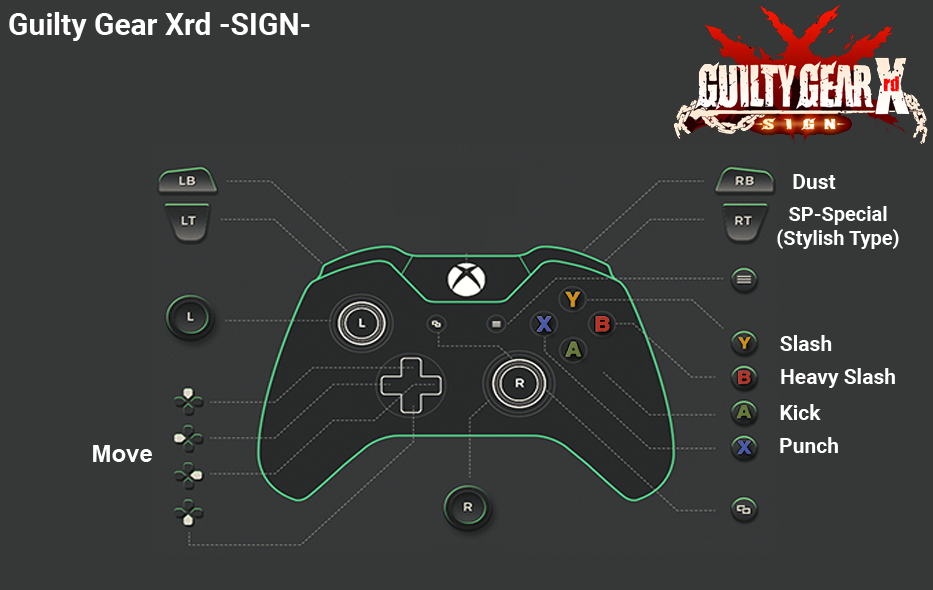
<style>
.page{position:relative;width:933px;height:590px;background:#363838}
.page>*{position:absolute;margin:0}
.t1{font:30px "Roboto-Bold";color:#ffffff}
.t2{font:21px "Roboto-Bold";color:#ffffff}
.t3{font:20px/24px "Roboto-Bold";color:#ffffff}
.t4{font:24px "Arial-BoldMT";color:#fefefe}
</style>
<div class="page">
<p class="t1" style="left:9px;top:12px;width:301px;height:29px">Guilty Gear Xrd -SIGN-</p>
<p class="t2" style="left:793px;top:174px;width:43px;height:15px">Dust</p>
<p class="t3" style="left:777px;top:206px;width:122px;height:43px;text-align:center">SP-Special<br>(Stylish Type)</p>
<p class="t2" style="left:780px;top:335px;width:52px;height:16px">Slash</p>
<p class="t2" style="left:781px;top:368px;width:114px;height:20px">Heavy Slash</p>
<p class="t2" style="left:780px;top:404px;width:41px;height:16px">Kick</p>
<p class="t2" style="left:780px;top:437px;width:58px;height:16px">Punch</p>
<p class="t4" style="left:93px;top:445px;width:59px;height:17px">Move</p>
</div>
